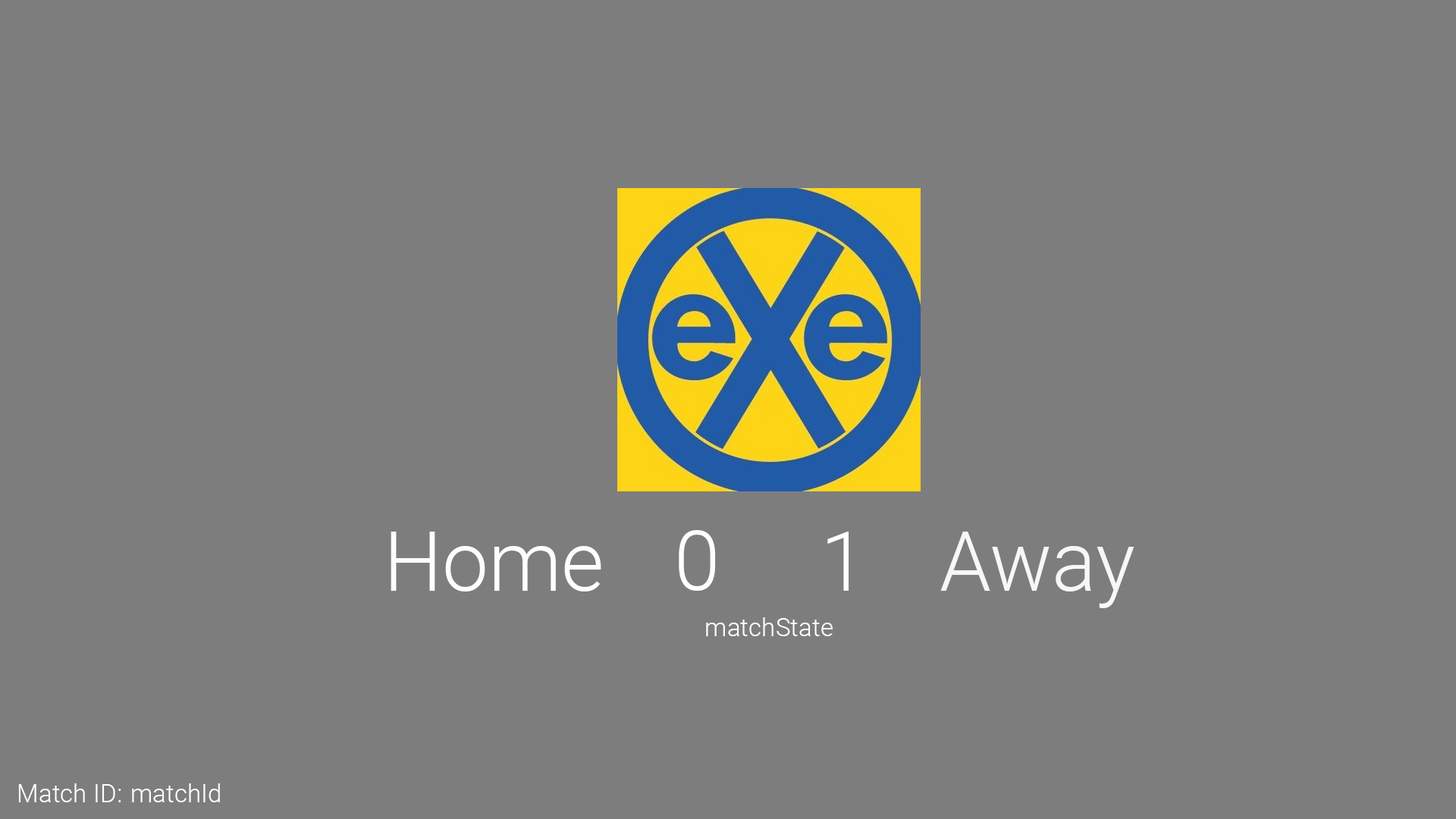
<style>
.page{position:relative;width:1456px;height:819px;background:#7d7d7d}
.page>*{position:absolute;margin:0}
.t1{font:82.5px "Roboto-Light";color:#ffffff}
.t2{font:82.5px "Roboto-Light";color:#f7f7f7}
.t3{font:25.3px "Roboto-Light";color:#ffffff}
</style>
<div class="page">
<p class="t1" style="left:391px;top:532px;width:210px;height:59px">Home</p>
<p class="t1" style="left:679px;top:530px;width:37px;height:61px">0</p>
<p class="t1" style="left:827px;top:532px;width:22px;height:59px">1</p>
<p class="t2" style="left:940px;top:532px;width:194px;height:76px">Away</p>
<p class="t3" style="left:706px;top:617px;width:127px;height:19px">matchState</p>
<p class="t3" style="left:18px;top:783px;width:103px;height:19px">Match ID:</p>
<p class="t3" style="left:132px;top:783px;width:88px;height:19px">matchId</p>
</div>
